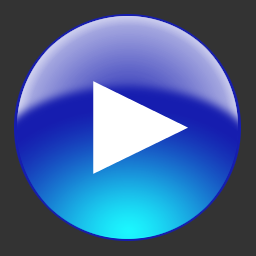
<style>
.page{position:relative;width:256px;height:256px;background:#333333}
.page>*{position:absolute;margin:0}
.t1{font:124.8px "DFGothic-UB-WINP-RKSJ-H";color:#ffffff;scale:0.85 1}
</style>
<div class="page">
<p class="t1" style="left:93px;top:81px;width:95px;height:93px;rotate:90deg">▲</p>
</div>
